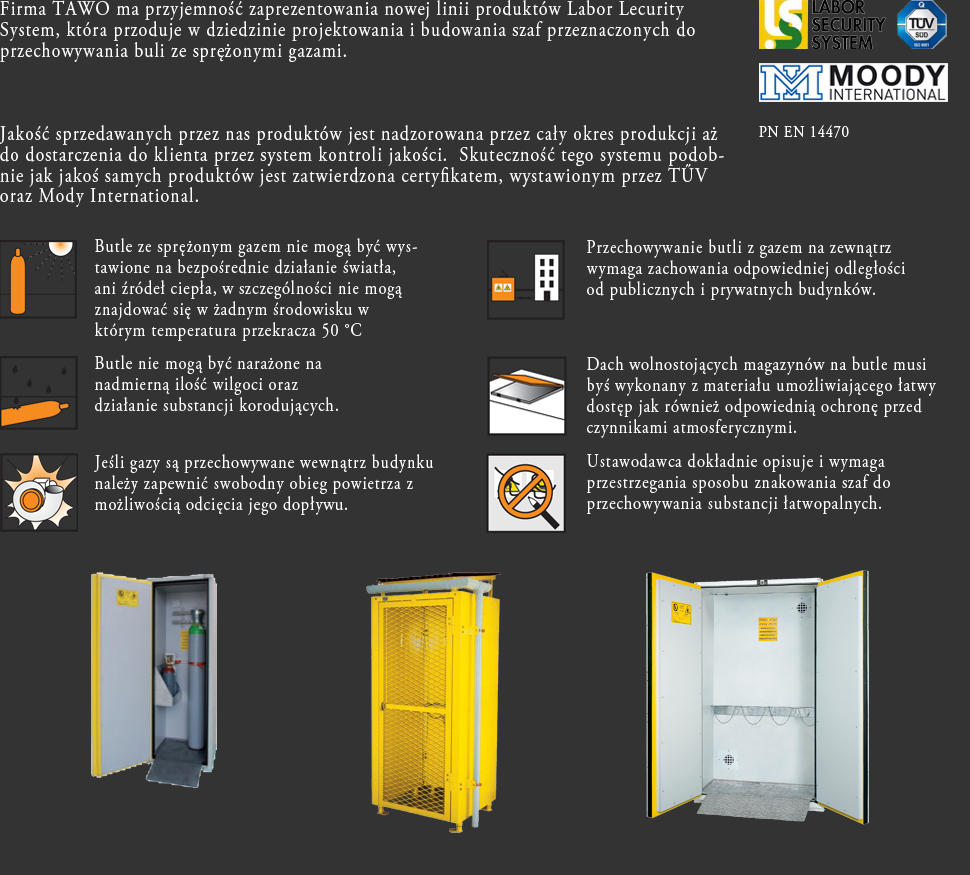
<style>
.page{position:relative;width:970px;height:875px;background:#333333}
.page>*{position:absolute;margin:0}
.t1{font:20.8px/20.8px "AGaramondPro-Regular";letter-spacing:0.065em;color:#fefefe;scale:0.85 1}
.t2{font:16.7px "AGaramondPro-Regular";letter-spacing:0.065em;color:#ffffff;scale:0.85 1}
.t3{font:18.7px/20.8px "AGaramondPro-Regular";letter-spacing:0.065em;color:#ffffff;scale:0.85 1}
.t4{font:18.8px/20.8px "AGaramondPro-Regular";letter-spacing:0.065em;color:#ffffff;scale:0.85 1}
</style>
<div class="page">
<p class="t1" style="left:0px;top:0px;width:724px;height:207px">Firma TAWO ma przyjemność zaprezentowania nowej linii produktów Labor Lecurity System, która przoduje w dziedzinie projektowania i budowania szaf przeznaczonych do przechowywania buli ze sprężonymi gazami.<br><br><br><br>Jakość sprzedawanych przez nas produktów jest nadzorowana przez cały okres produkcji aż do dostarczenia do klienta przez system kontroli jakości.  Skuteczność tego systemu podobnie jak jakoś samych produktów jest zatwierdzona certyfikatem, wystawionym przez TŰV oraz Mody International.</p>
<p class="t2" style="left:759px;top:125px;width:90px;height:13px">PN EN 14470</p>
<p class="t3" style="left:95px;top:238px;width:322px;height:103px">Butle ze sprężonym gazem nie mogą być wystawione na bezpośrednie działanie światła, ani źródeł ciepła, w szczególności nie mogą znajdować się w żadnym środowisku w którym temperatura przekracza 50 °C</p>
<p class="t4" style="left:586px;top:239px;width:319px;height:61px">Przechowywanie butli z gazem na zewnątrz wymaga zachowania odpowiedniej odległości od publicznych i prywatnych budynków.</p>
<p class="t3" style="left:95px;top:355px;width:243px;height:61px">Butle nie mogą być narażone na nadmierną ilość wilgoci oraz działanie substancji korodujących.</p>
<p class="t3" style="left:587px;top:356px;width:349px;height:82px">Dach wolnostojących magazynów na butle musi byś wykonany z materiału umożliwiającego łatwy dostęp jak również odpowiednią ochronę przed czynnikami atmosferycznymi.</p>
<p class="t4" style="left:94px;top:454px;width:340px;height:61px">Jeśli gazy są przechowywane wewnątrz budynku należy zapewnić swobodny obieg powietrza z możliwością odcięcia jego dopływu.</p>
<p class="t4" style="left:587px;top:453px;width:303px;height:61px">Ustawodawca dokładnie opisuje i wymaga przestrzegania sposobu znakowania szaf do przechowywania substancji łatwopalnych.</p>
</div>
